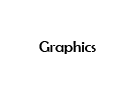
<style>
.page{position:relative;width:126px;height:95px;background:#ffffff}
.page>*{position:absolute;margin:0}
.t1{font:16px "BerlinSansFB-Reg";color:#000000}
</style>
<div class="page">
<p class="t1" style="left:39px;top:41px;width:57px;height:13px">Graphics</p>
</div>
